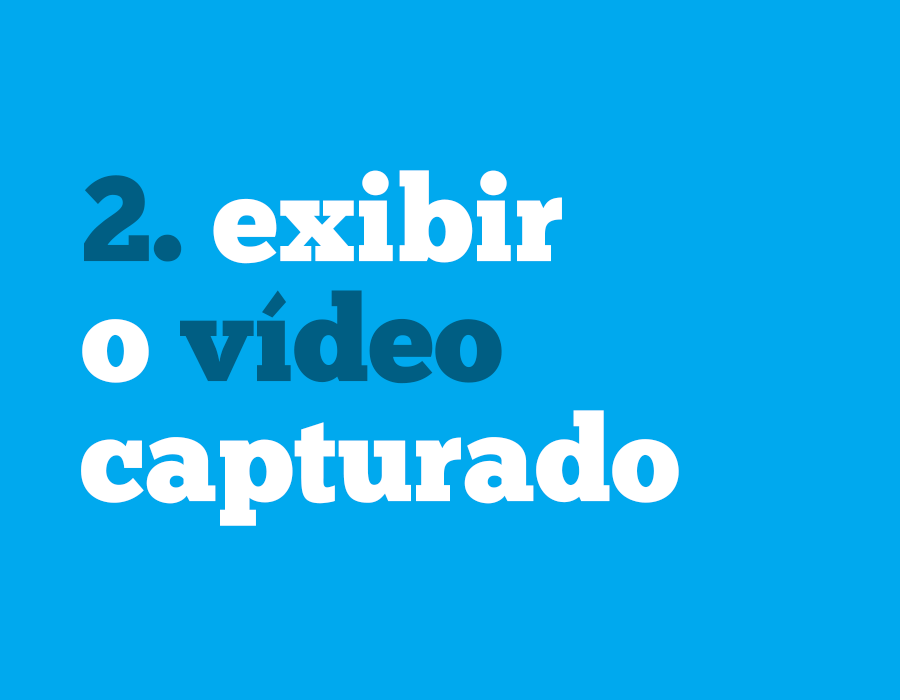
<style>
.page{position:relative;width:900px;height:700px;background:#00a9ee}
.page>*{position:absolute;margin:0}
.t1{font:120.7px/120px "ChunkFive-Roman";color:#ffffff}
.t2{font:120.7px/120px "ChunkFive-Roman";color:#005e83}
</style>
<div class="page">
<p class="t1" style="left:81px;top:170px;width:598px;height:356px"><span class="t2">2. </span>exibir<br>o <span class="t2">vídeo<br></span>capturado</p>
</div>
